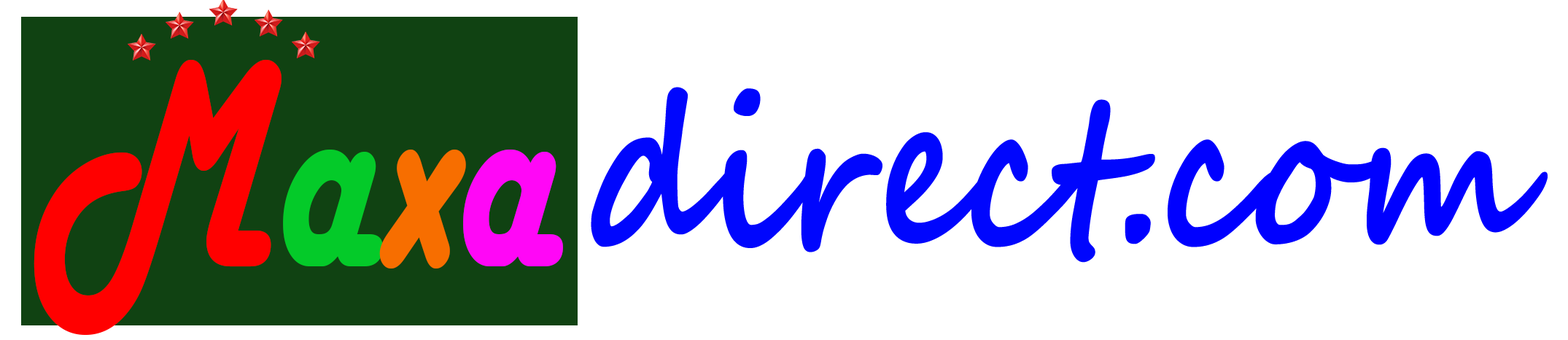
<style>
.page{position:relative;width:1568px;height:340px;background:#ffffff}
.page>*{position:absolute;margin:0}
.t1{font:307.1px "HarlowSolid";color:#ff0000;scale:0.72 1}
.t2{font:307.1px "HarlowSolid";color:#04ca29;scale:0.72 1}
.t3{font:307.1px "HarlowSolid";color:#f76e00;scale:0.72 1}
.t4{font:307.1px "HarlowSolid";color:#ff07f6;scale:0.72 1}
.t5{font:206.8px "SegoeScript-Bold";color:#0006fd;scale:0.83 1}
.t6{font:206.8px "SegoeScript-Bold";color:#0000ff;scale:0.83 1}
</style>
<div class="page">
<p class="t1" style="left:34px;top:59px;width:529px;height:276px">M<span class="t2">a</span><span class="t3">x</span><span class="t4">a</span></p>
<p class="t5" style="left:591px;top:87px;width:957px;height:176px">direct<span class="t6">.com</span></p>
</div>
